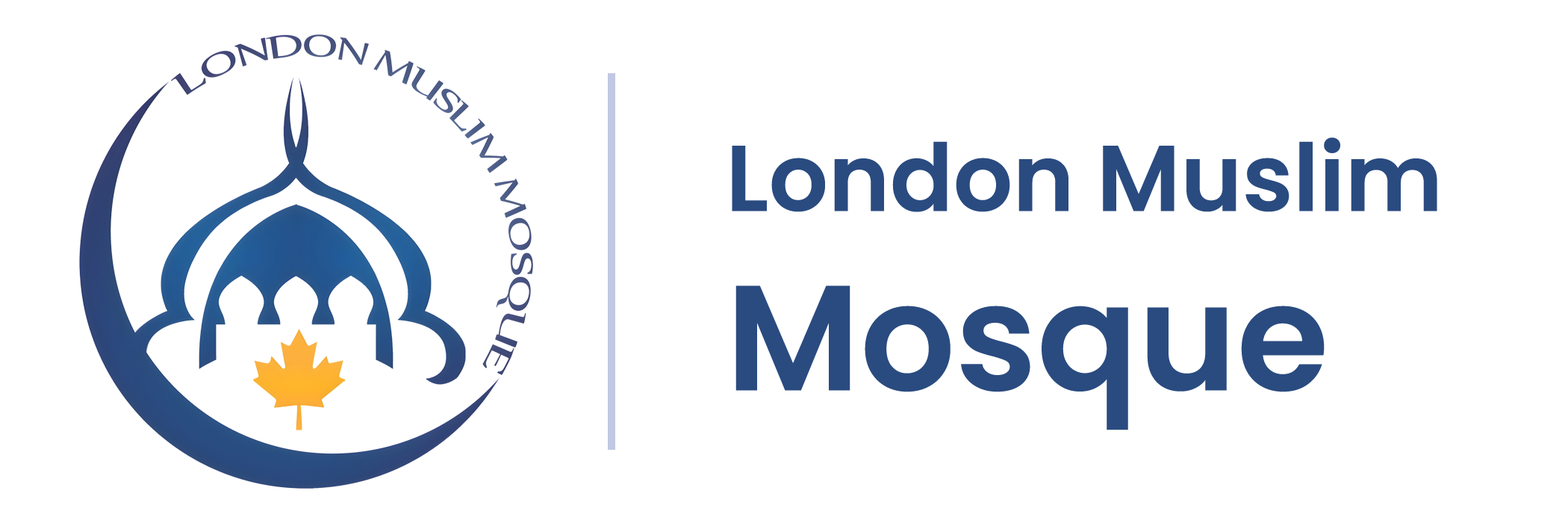
<style>
.page{position:relative;width:1568px;height:523px;background:#ffffff}
.page>*{position:absolute;margin:0}
.t1{font:93.3px "Poppins-SemiBold";color:#2a4b80}
.t2{font:149.3px "Poppins-SemiBold";color:#2a4b80}
</style>
<div class="page">
<p class="t1" style="left:732px;top:137px;width:705px;height:293px">London Muslim <span class="t2">Mosque</span></p>
</div>
